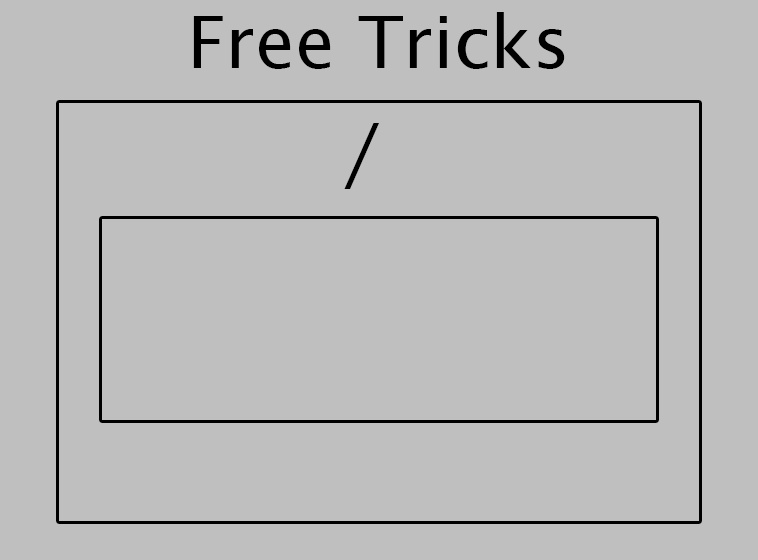
<style>
.page{position:relative;width:758px;height:560px;background:#bfbfbf}
.page>*{position:absolute;margin:0}
.t1{font:72px "LucidaSans";color:#000000}
</style>
<div class="page">
<p class="t1" style="left:193px;top:12px;width:372px;height:57px">Free Tricks</p>
<p class="t1" style="left:344px;top:123px;width:35px;height:66px">/</p>
</div>
